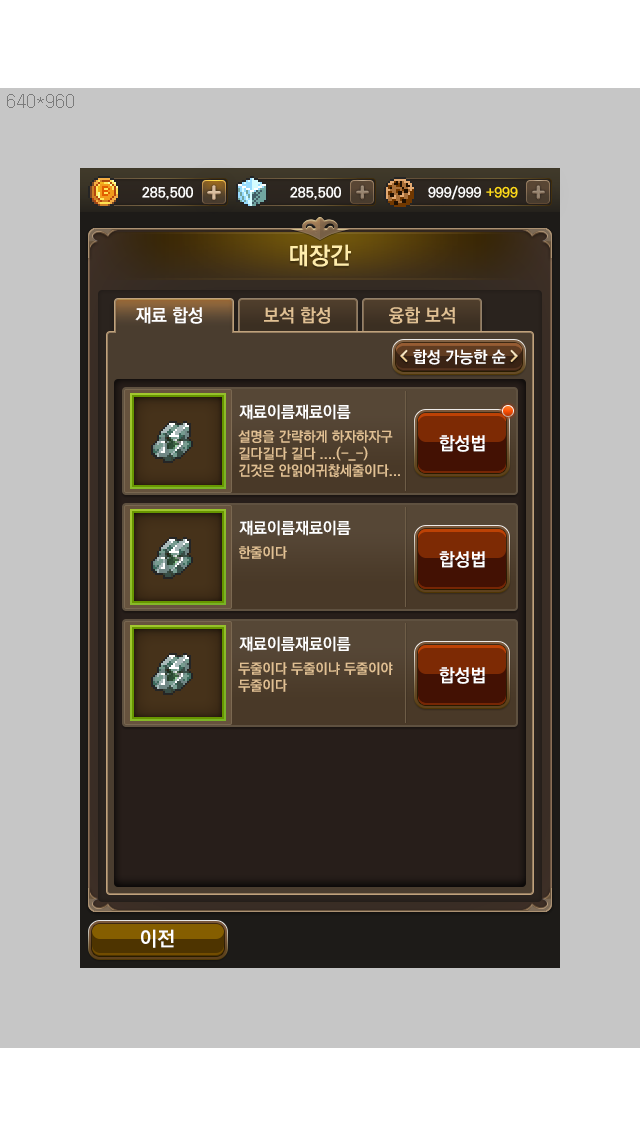
<style>
.page{position:relative;width:640px;height:1136px;background:#c6c6c6}
.page>*{position:absolute;margin:0}
.t1{font:24px "KoPubDotumBold";color:#ffedab}
.t2{font:18px "KoPubDotumBold";color:#ffffff}
.t3{font:18px "KoPubDotumBold";color:#e0c093}
.t4{font:16px "KoPubDotumBold";color:#ffffff}
.t5{font:14px "KoPubDotumBold";color:#e1c093}
</style>
<div class="page">
<p class="t1" style="left:290px;top:244px;width:61px;height:23px">대장간</p>
<p class="t2" style="left:135px;top:307px;width:67px;height:17px">재료 합성</p>
<p class="t3" style="left:264px;top:307px;width:66px;height:17px">보석 합성</p>
<p class="t3" style="left:389px;top:307px;width:66px;height:17px">융합 보석</p>
<p class="t4" style="left:413px;top:349px;width:93px;height:16px">합성 가능한 순</p>
<p class="t4" style="left:239px;top:404px;width:112px;height:16px">재료이름재료이름</p>
<p class="t5" style="left:238px;top:430px;width:162px;height:48px">설명을 간략하게 하자하자구 <br>길다길다 길다 ....(-_-) <br>긴것은 안읽어귀찮세줄이다...</p>
<p class="t2" style="left:439px;top:435px;width:46px;height:17px">합성법</p>
<p class="t4" style="left:239px;top:520px;width:112px;height:16px">재료이름재료이름</p>
<p class="t5" style="left:239px;top:546px;width:48px;height:13px">한줄이다</p>
<p class="t2" style="left:439px;top:551px;width:46px;height:17px">합성법</p>
<p class="t4" style="left:239px;top:636px;width:112px;height:16px">재료이름재료이름</p>
<p class="t5" style="left:238px;top:662px;width:155px;height:30px">두줄이다 두줄이냐 두줄이야<br>두줄이다</p>
<p class="t2" style="left:439px;top:667px;width:46px;height:17px">합성법</p>
</div>
